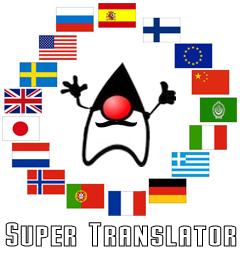
<style>
.page{position:relative;width:240px;height:260px;background:#ffffff}
.page>*{position:absolute;margin:0}
.t1{font:34px "StarkHollow";color:#010000}
</style>
<div class="page">
<p class="t1" style="left:5px;top:222px;width:232px;height:25px">Super Translator</p>
</div>
